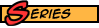
<style>
.page{position:relative;width:99px;height:28px;background:#ffffff}
.page>*{position:absolute;margin:0}
.t1{font:10.3px "AnimeAce2.0BB-Bold";color:#000000}
</style>
<div class="page">
<p class="t1" style="left:30px;top:8px;width:41px;height:11px">eries</p>
</div>
